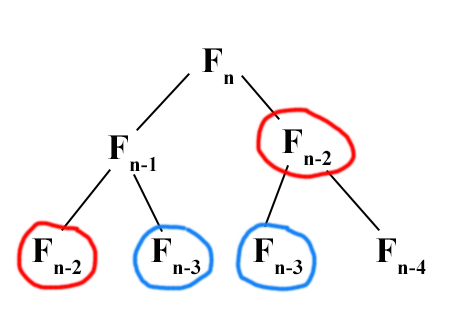
<style>
.page{position:relative;width:450px;height:334px;background:#ffffff}
.page>*{position:absolute;margin:0}
.t1{font:36px "TimesNewRomanPS-BoldMT";color:#020202}
</style>
<div class="page">
<p class="t1" style="left:202px;top:48px;width:32px;height:36px">Fn</p>
<p class="t1" style="left:108px;top:135px;width:49px;height:36px">Fn-1</p>
<p class="t1" style="left:282px;top:129px;width:50px;height:36px">Fn-2</p>
<p class="t1" style="left:32px;top:238px;width:50px;height:36px">Fn-2</p>
<p class="t1" style="left:151px;top:238px;width:50px;height:37px">Fn-3</p>
<p class="t1" style="left:253px;top:238px;width:50px;height:37px">Fn-3</p>
<p class="t1" style="left:376px;top:238px;width:50px;height:36px">Fn-4</p>
</div>
